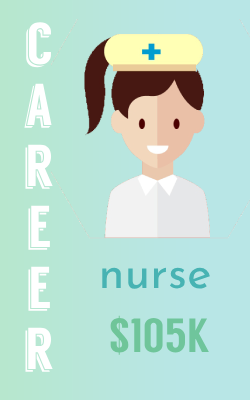
<style>
.page{position:relative;width:250px;height:400px;background:#b8e6e6}
.page>*{position:absolute;margin:0}
.t1{font:59px/57px "Langdon";color:#ffffff}
.t2{font:47px "JosefinSans-Regular";color:#47b3b3}
.t3{font:48px "Langdon";color:#6fc59b}
</style>
<div class="page">
<p class="t1" style="left:24px;top:22px;width:29px;height:350px;text-align:center">c<br>a<br>r<br>e<br>e<br>r</p>
<p class="t2" style="left:102px;top:267px;width:108px;height:22px">nurse</p>
<p class="t3" style="left:110px;top:315px;width:99px;height:40px">$105K</p>
</div>
